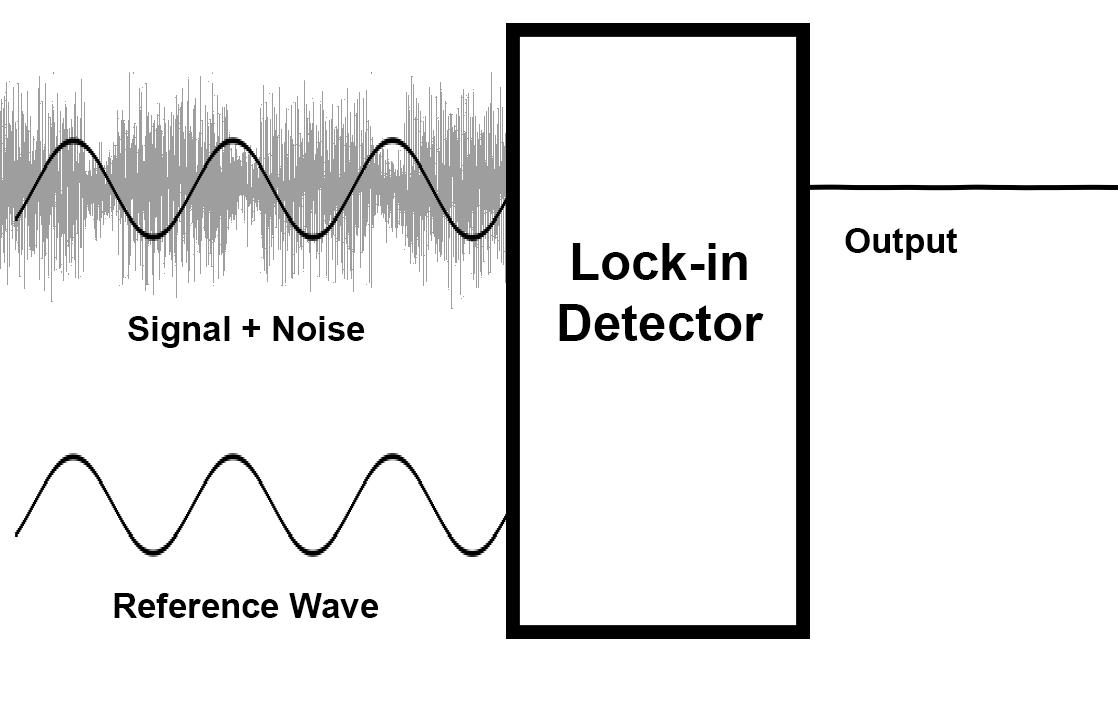
<style>
.page{position:relative;width:1118px;height:712px;background:#ffffff}
.page>*{position:absolute;margin:0}
.t1{font:34.7px "Arial-BoldMT";color:#000000}
.t2{font:51px "Arial-BoldMT";color:#000000}
</style>
<div class="page">
<p class="t1" style="left:845px;top:228px;width:113px;height:32px">Output</p>
<p class="t2" style="left:559px;top:243px;width:205px;height:98px;text-align:center">Lock-in<br>Detector</p>
<p class="t1" style="left:128px;top:316px;width:237px;height:32px">Signal + Noise</p>
<p class="t1" style="left:114px;top:593px;width:265px;height:25px">Reference Wave</p>
</div>
